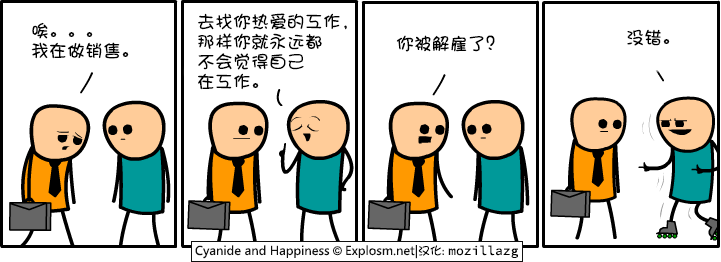
<style>
.page{position:relative;width:721px;height:262px;background:#ffffff}
.page>*{position:absolute;margin:0}
.t1{font:18px/20px "DFPShaoNvW5";color:#000000}
.t2{font:18px "DFPShaoNvW5";color:#000000}
</style>
<div class="page">
<p class="t1" style="left:198px;top:13px;width:149px;height:77px">去找你热爱的工作，<br>那样你就永远都<br>不会觉得自己<br>在工作。</p>
<p class="t1" style="left:31px;top:22px;width:98px;height:37px">唉。。。<br>我在做销售。</p>
<p class="t2" style="left:627px;top:29px;width:43px;height:17px">没错。</p>
<p class="t2" style="left:396px;top:35px;width:99px;height:17px">你被解雇了？</p>
</div>
